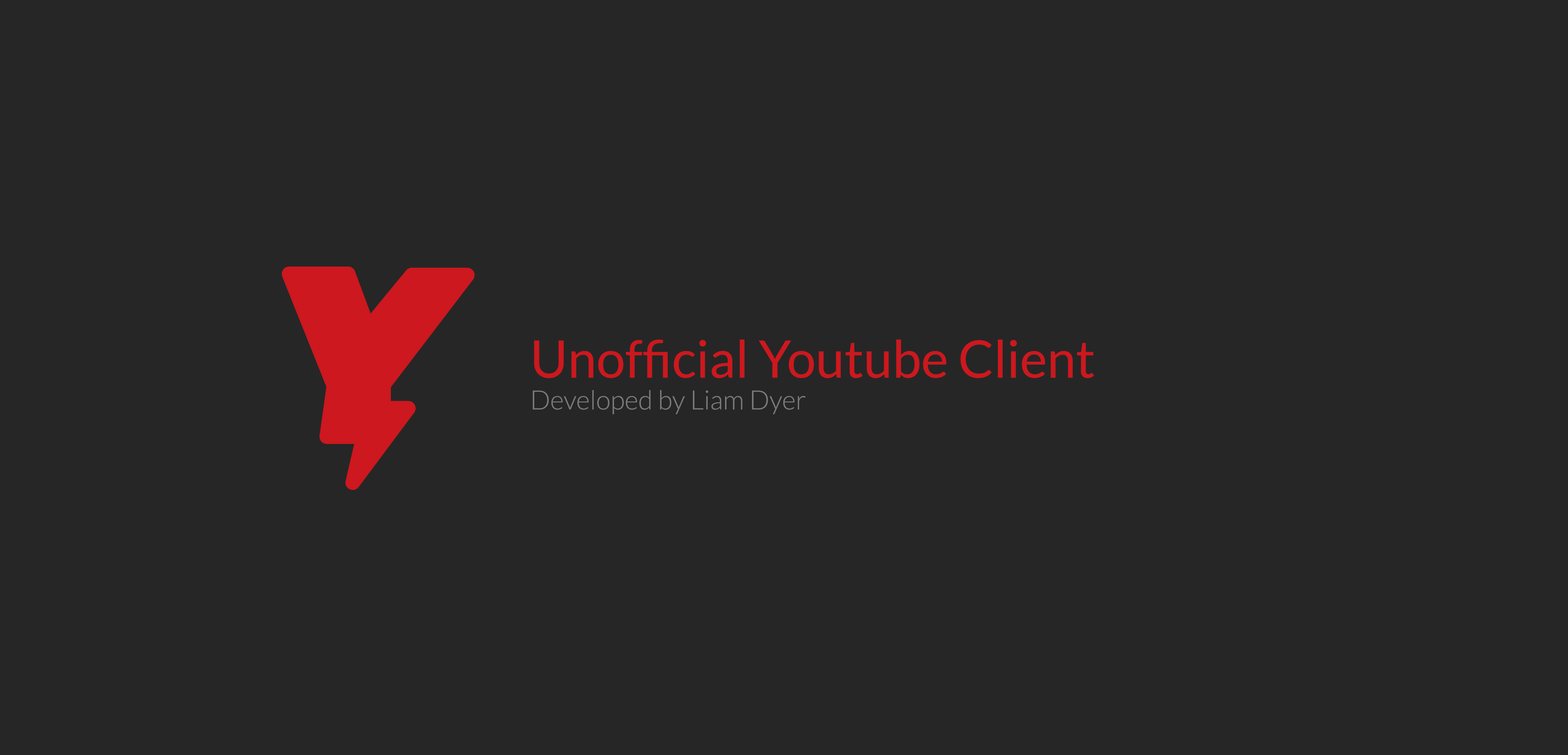
<style>
.page{position:relative;width:1568px;height:755px;background:#262626}
.page>*{position:absolute;margin:0}
.t1{font:51.6px "Lato-Regular";color:#cc181e}
.t2{font:26.6px "Lato-Light";color:#7d7a7a}
</style>
<div class="page">
<p class="t1" style="left:533px;top:340px;width:561px;height:74px">Unofficial Youtube Client<br><span class="t2">Developed by Liam Dyer</span></p>
</div>
